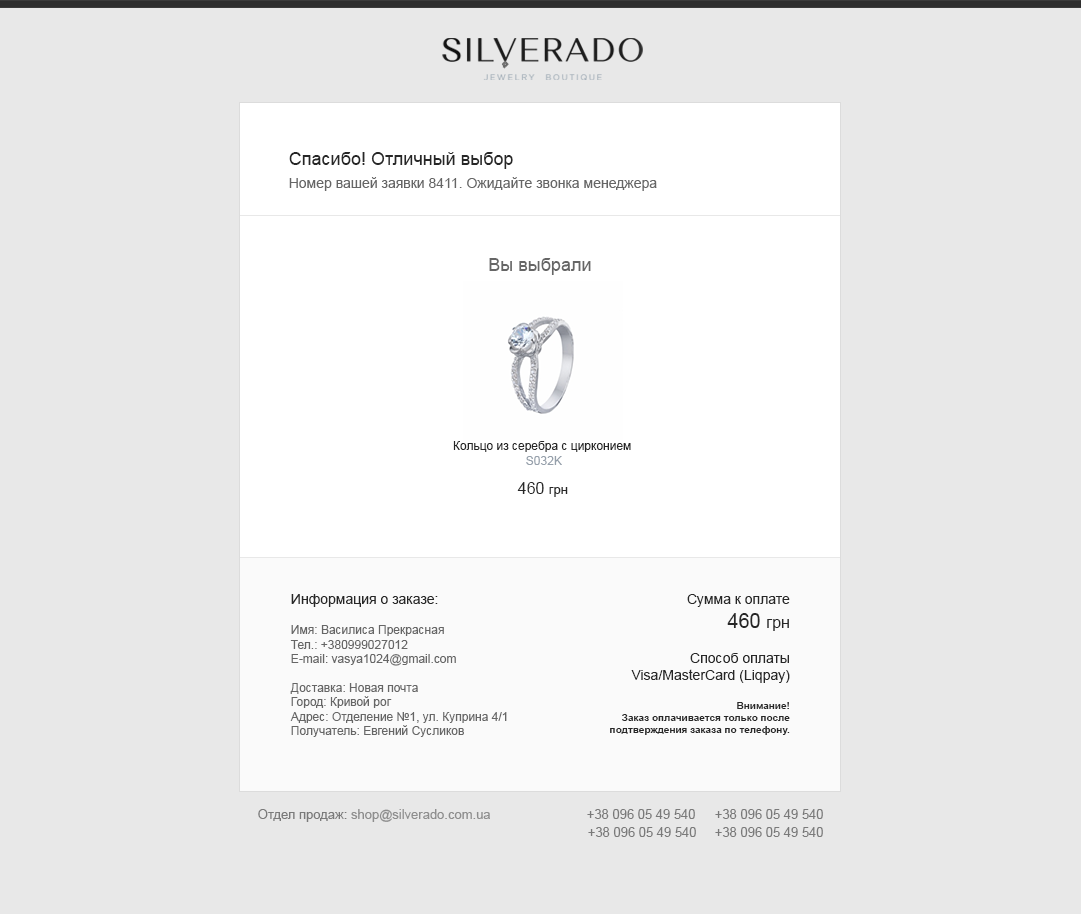
<style>
.page{position:relative;width:1081px;height:914px;background:#e8e8e8}
.page>*{position:absolute;margin:0}
.t1{font:18px "ArialMT";color:#272727}
.t2{font:14px "ArialMT";color:#666666}
.t3{font:18px "ArialMT";color:#666666}
.t4{font:12px "ArialMT";color:#272727}
.t5{font:12px "ArialMT";color:#96a0ab}
.t6{font:16px "ArialMT";color:#272727}
.t7{font:13px "ArialMT";color:#272727}
.t8{font:14px "ArialMT";color:#272727}
.t9{font:20px "ArialMT";color:#272727}
.t10{font:12px "ArialMT";color:#666666}
.t11{font:10px "Arial-BoldMT";color:#272727}
.t12{font:13px "ArialMT";color:#8e8e8e}
.t13{font:13px "ArialMT";color:#7a7a7a}
</style>
<div class="page">
<p class="t1" style="left:289px;top:152px;width:224px;height:17px">Спасибо! Отличный выбор</p>
<p class="t2" style="left:289px;top:177px;width:368px;height:14px">Номер вашей заявки 8411. Ожидайте звонка менеджера</p>
<p class="t3" style="left:489px;top:258px;width:102px;height:17px">Вы выбрали</p>
<p class="t4" style="left:453px;top:441px;width:178px;height:24px;text-align:center">Кольцо из серебра с цирконием <br><span class="t5">S032K</span></p>
<p class="t6" style="left:517px;top:482px;width:51px;height:15px">460 <span class="t7">грн</span></p>
<p class="t8" style="left:291px;top:594px;width:147px;height:13px">Информация о заказе:</p>
<p class="t8" style="left:687px;top:594px;width:103px;height:37px;text-align:right">Сумма к оплате<br><span class="t9">460 </span><span class="t6">грн</span></p>
<p class="t10" style="left:290px;top:625px;width:217px;height:112px">Имя: Василиса Прекрасная<br>Тел.: +380999027012<br>E-mail: vasya1024@gmail.com<br><br>Доставка: Новая почта<br>Город: Кривой рог<br>Адрес: Отделение №1, ул. Куприна 4/1<br>Получатель: Евгений Сусликов</p>
<p class="t11" style="left:610px;top:653px;width:180px;height:82px;text-align:right"><span class="t8">Способ оплаты<br>Visa/MasterCard (Liqpay)<br><br></span>Внимание!<br>Заказ оплачивается только после<br>подтверждения заказа по телефону.</p>
<p class="t12" style="left:258px;top:809px;width:232px;height:13px"><span class="t13">Отдел продаж: </span>shop@silverado.com.ua</p>
<p class="t13" style="left:587px;top:809px;width:108px;height:10px">+38 096 05 49 540</p>
<p class="t13" style="left:715px;top:809px;width:108px;height:10px">+38 096 05 49 540</p>
<p class="t13" style="left:588px;top:827px;width:108px;height:10px">+38 096 05 49 540</p>
<p class="t13" style="left:715px;top:827px;width:108px;height:10px">+38 096 05 49 540</p>
</div>
